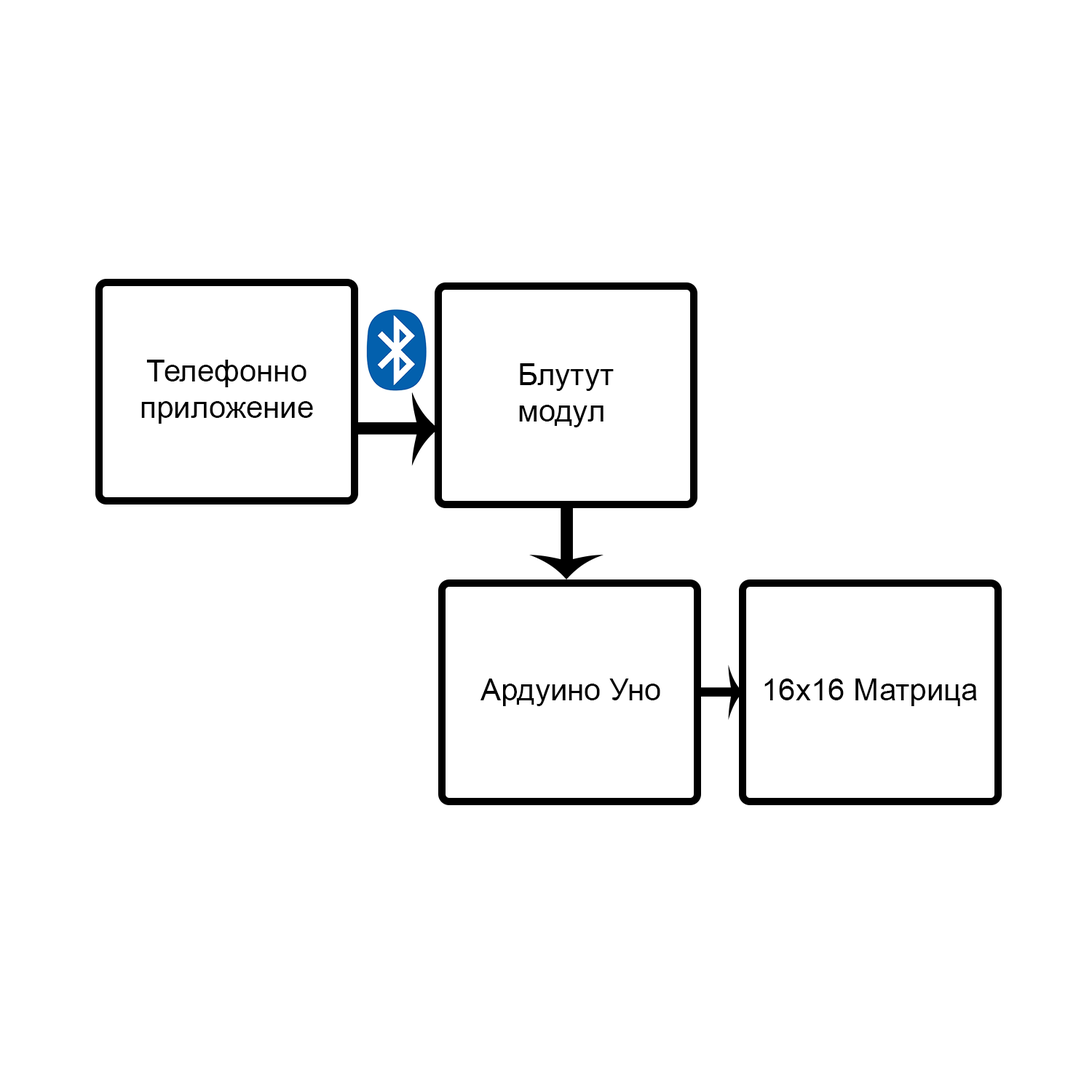
<style>
.page{position:relative;width:1092px;height:1092px;background:#ffffff}
.page>*{position:absolute;margin:0}
.t1{font:30.6px "ArialMT";color:#000000}
</style>
<div class="page">
<p class="t1" style="left:141px;top:360px;width:172px;height:64px;text-align:center">Телефонно<br>приложение</p>
<p class="t1" style="left:519px;top:363px;width:95px;height:64px;text-align:justify">Блутут <br>модул</p>
<p class="t1" style="left:480px;top:678px;width:180px;height:28px">Ардуино Уно</p>
<p class="t1" style="left:764px;top:678px;width:213px;height:28px">16х16 Матрица</p>
</div>
